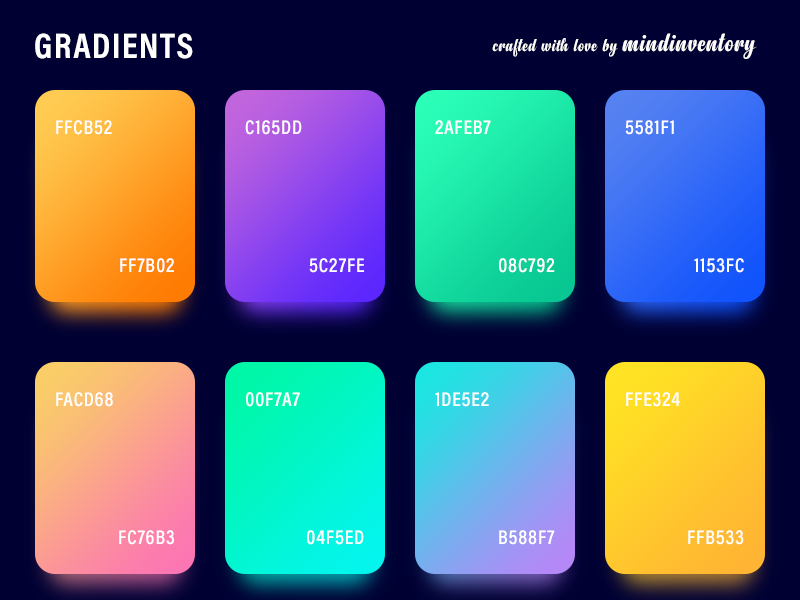
<style>
.page{position:relative;width:800px;height:600px;background:#000033}
.page>*{position:absolute;margin:0}
.t1{font:36px "AcuminProCond-Bold";letter-spacing:0.04em;color:#ffffff;text-transform:uppercase}
.t2{font:18px "Anydore";letter-spacing:0.04em;color:#ffffff}
.t3{font:26px "Anydore";letter-spacing:0.04em;color:#ffffff}
.t4{font:20px "AcuminProCond-Semibold";letter-spacing:0.04em;color:#ffffff;text-transform:uppercase}
</style>
<div class="page">
<p class="t1" style="left:35px;top:33px;width:158px;height:26px">Gradients</p>
<p class="t2" style="left:492px;top:33px;width:265px;height:26px">crafted with love by <span class="t3">mindinventory</span></p>
<p class="t4" style="left:56px;top:120px;width:56px;height:15px">ffcb52</p>
<p class="t4" style="left:245px;top:120px;width:57px;height:15px">c165dd</p>
<p class="t4" style="left:435px;top:120px;width:56px;height:14px">2afeb7</p>
<p class="t4" style="left:625px;top:120px;width:49px;height:15px">5581f1</p>
<p class="t4" style="left:120px;top:258px;width:54px;height:15px">ff7b02</p>
<p class="t4" style="left:309px;top:258px;width:56px;height:15px">5c27fe</p>
<p class="t4" style="left:499px;top:258px;width:56px;height:15px">08c792</p>
<p class="t4" style="left:694px;top:258px;width:50px;height:15px">1153fc</p>
<p class="t4" style="left:56px;top:392px;width:57px;height:15px">facd68</p>
<p class="t4" style="left:246px;top:392px;width:54px;height:15px">00f7a7</p>
<p class="t4" style="left:435px;top:392px;width:54px;height:15px">1de5e2</p>
<p class="t4" style="left:626px;top:392px;width:54px;height:15px">ffe324</p>
<p class="t4" style="left:119px;top:530px;width:55px;height:15px">fc76b3</p>
<p class="t4" style="left:307px;top:530px;width:57px;height:15px">04f5ed</p>
<p class="t4" style="left:499px;top:530px;width:56px;height:15px">b588f7</p>
<p class="t4" style="left:688px;top:530px;width:56px;height:15px">ffb533</p>
</div>
